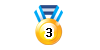
<style>
.page{position:relative;width:100px;height:50px;background:#ffffff}
.page>*{position:absolute;margin:0}
.t1{font:12px "Dotum";color:#000000;font-weight:bold}
</style>
<div class="page">
<p class="t1" style="left:46px;top:28px;width:6px;height:9px">3</p>
</div>
